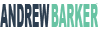
<style>
.page{position:relative;width:98px;height:30px;background:#ffffff}
.page>*{position:absolute;margin:0}
.t1{font:31.8px "Arial-Black";color:#2c3e50;scale:0.32 1}
.t2{font:31.4px "Arial-Black";color:#68c3a3;scale:0.32 1}
</style>
<div class="page">
<p class="t1" style="left:0px;top:4px;width:50px;height:23px">ANDREW</p>
<p class="t2" style="left:51px;top:4px;width:47px;height:23px">BARKER</p>
</div>
